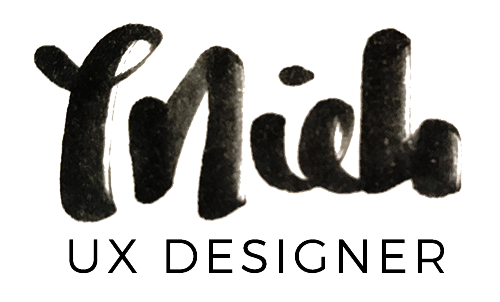
<style>
.page{position:relative;width:500px;height:302px;background:#ffffff}
.page>*{position:absolute;margin:0}
.t1{font:48px "Montserrat-Light";letter-spacing:0.1em;color:#000000}
</style>
<div class="page">
<p class="t1" style="left:69px;top:239px;width:376px;height:35px">UX DESIGNER</p>
</div>
